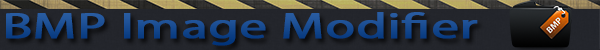
<style>
.page{position:relative;width:600px;height:50px}
.page>*{position:absolute;margin:0}
.t1{font:36px "MyriadPro-Regular";color:#174a8f;font-weight:bold;scale:1.49 1}
</style>
<div class="page">
<p class="t1" style="left:6px;top:12px;width:472px;height:34px">BMP Image Modifier</p>
</div>
